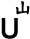
<style>
.page{position:relative;width:30px;height:39px;background:#ffffff}
.page>*{position:absolute;margin:0}
.t1{font:18px "DFKaiShu-SB-Estd-BF";color:#000000;font-weight:bold}
.t2{font:27px "ArialMT";color:#000000;font-weight:bold}
</style>
<div class="page">
<p class="t1" style="left:15px;top:1px;width:15px;height:14px">山</p>
<p class="t2" style="left:1px;top:18px;width:17px;height:21px">U</p>
</div>
